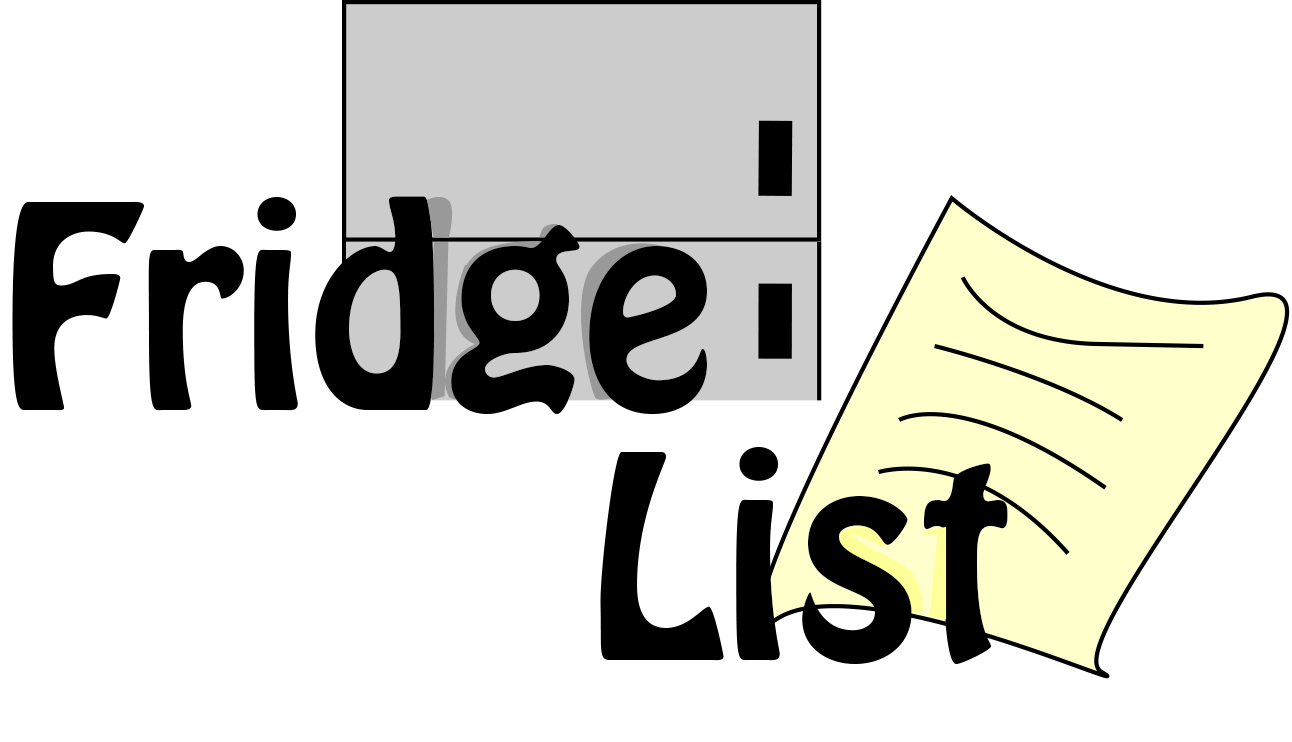
<style>
.page{position:relative;width:1292px;height:742px;background:#ffffff}
.page>*{position:absolute;margin:0}
.t1{font:250px "HoboStd";color:#000000}
</style>
<div class="page">
<p class="t1" style="left:12px;top:196px;width:695px;height:218px">Fridge</p>
<p class="t1" style="left:600px;top:447px;width:408px;height:217px">List</p>
</div>
